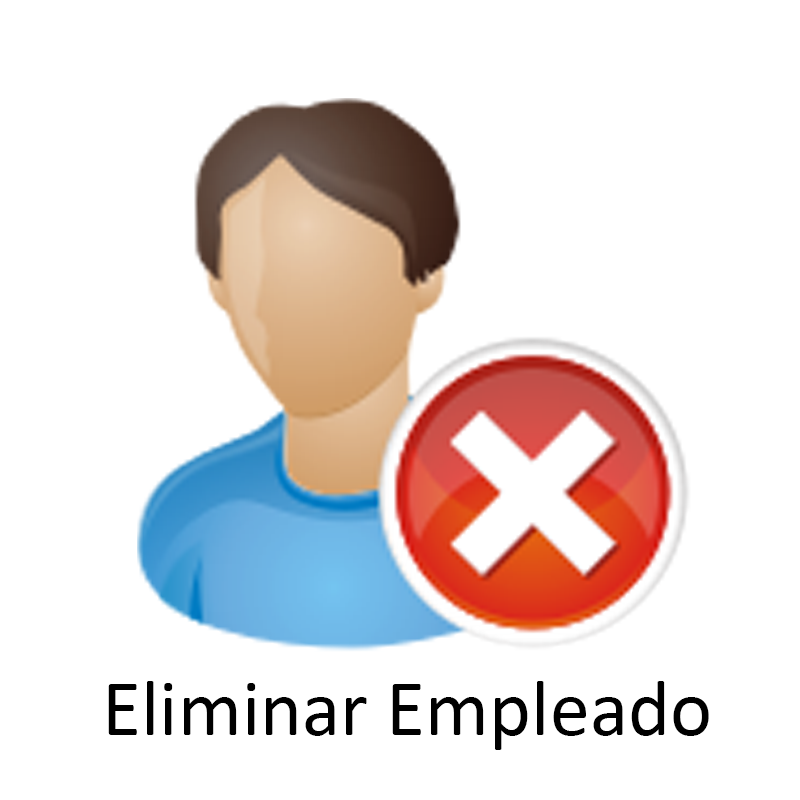
<style>
.page{position:relative;width:800px;height:800px;background:#ffffff}
.page>*{position:absolute;margin:0}
.t1{font:80px "Calibri";color:#000000}
</style>
<div class="page">
<p class="t1" style="left:108px;top:681px;width:601px;height:69px">Eliminar Empleado</p>
</div>
